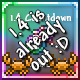
<style>
.page{position:relative;width:80px;height:80px}
.page>*{position:absolute;margin:0}
.t1{font:20.4px/19.2px "Andy-Bold";color:#ffffff}
</style>
<div class="page">
<p class="t1" style="left:9px;top:10px;width:59px;height:61px;text-align:center;rotate:-37deg">1.4 is<br>already<br>out :D</p>
</div>
